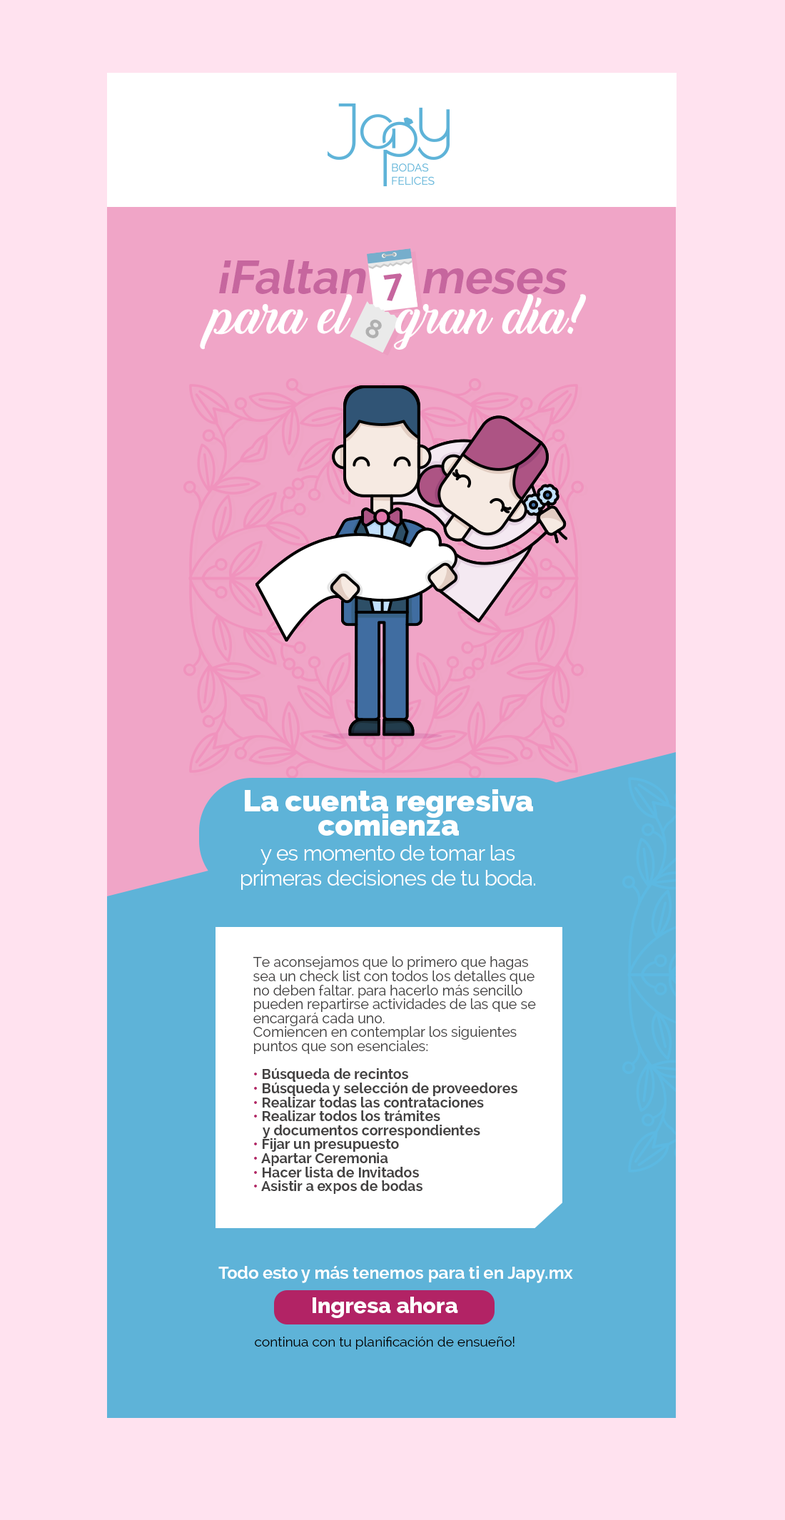
<style>
.page{position:relative;width:785px;height:1520px;background:#ffe2ef}
.page>*{position:absolute;margin:0}
.t1{font:45.8px "Raleway-Bold";color:#c6669e;font-style:italic}
.t2{font:49.1px "BacktoBlackDemo";color:#ffffff}
.t3{font:21.3px/24.8px "Raleway-Regular";letter-spacing:-0.025em;color:#ffffff}
.t4{font:29.7px/24.8px "Raleway-Heavy";color:#ffffff}
.t5{font:14px/14px "Raleway-Regular";color:#444242}
.t6{font:14px/14px "Raleway-Bold";color:#b22365}
.t7{font:14px/14px "Raleway-Bold";color:#444242}
.t8{font:16.9px "Raleway-Bold";color:#ffffff}
.t9{font:21.9px "Raleway-ExtraBold";color:#ffffff}
.t10{font:13.6px "Raleway-Regular";color:#000000}
</style>
<div class="page">
<p class="t1" style="left:219px;top:260px;width:348px;height:34px">¡Faltan     meses</p>
<p class="t2" style="left:200px;top:294px;width:386px;height:56px">para el   gran día!</p>
<p class="t3" style="left:241px;top:789px;width:294px;height:101px;text-align:center"><span class="t4">La cuenta regresiva comienza<br></span>y es momento de tomar las <br>primeras decisiones de tu boda.</p>
<p class="t5" style="left:253px;top:956px;width:283px;height:238px">Te aconsejamos que lo primero que hagas sea un check list con todos los detalles que no deben faltar. para hacerlo más sencillo pueden repartirse actividades de las que se encargará cada uno.<br>Comiencen en contemplar los siguientes puntos que son esenciales:<br><br><span class="t6">•</span><span class="t7"> Búsqueda de recintos<br></span><span class="t6">•</span><span class="t7"> Búsqueda y selección de proveedores<br></span><span class="t6">•</span><span class="t7"> Realizar todas las contrataciones<br></span><span class="t6">•</span><span class="t7"> Realizar todos los trámites <br>   y documentos correspondientes<br></span><span class="t6">•</span><span class="t7"> Fijar un presupuesto <br></span><span class="t6">•</span><span class="t7"> Apartar Ceremonia<br></span><span class="t6">•</span><span class="t7"> Hacer lista de Invitados<br></span><span class="t6">•</span><span class="t7"> Asistir a expos de bodas</span></p>
<p class="t8" style="left:218px;top:1266px;width:355px;height:17px">Todo esto y más tenemos para ti en Japy.mx</p>
<p class="t9" style="left:312px;top:1296px;width:146px;height:22px">Ingresa ahora</p>
<p class="t10" style="left:255px;top:1336px;width:259px;height:13px">continua con tu planificación de ensueño!</p>
</div>
